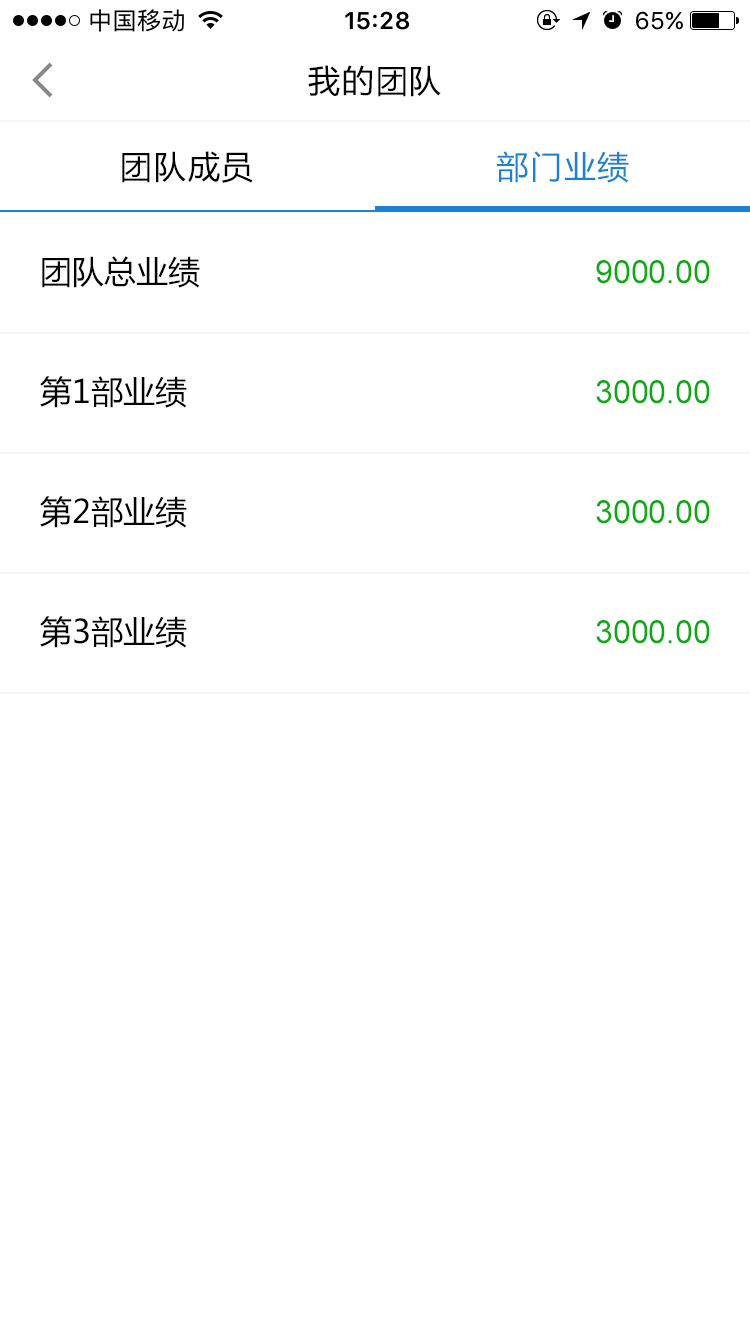
<style>
.page{position:relative;width:750px;height:1334px;background:#ffffff}
.page>*{position:absolute;margin:0}
.t1{font:32px "MicrosoftYaHei";letter-spacing:0.05em;color:#000000}
.t2{font:32px "MicrosoftYaHei";letter-spacing:0.05em;color:#1b82d2}
.t3{font:32px "MicrosoftYaHei";color:#000000}
.t4{font:32px "ArialMT";color:#0da914}
</style>
<div class="page">
<p class="t1" style="left:308px;top:65px;width:133px;height:32px">我的团队</p>
<p class="t1" style="left:122px;top:151px;width:131px;height:32px">团队成员</p>
<p class="t2" style="left:496px;top:151px;width:133px;height:32px">部门业绩</p>
<p class="t3" style="left:42px;top:256px;width:158px;height:32px">团队总业绩</p>
<p class="t4" style="left:596px;top:260px;width:114px;height:24px">9000.00</p>
<p class="t3" style="left:40px;top:376px;width:147px;height:32px">第1部业绩</p>
<p class="t4" style="left:596px;top:380px;width:114px;height:24px">3000.00</p>
<p class="t3" style="left:40px;top:496px;width:147px;height:32px">第2部业绩</p>
<p class="t4" style="left:596px;top:500px;width:114px;height:24px">3000.00</p>
<p class="t3" style="left:40px;top:616px;width:147px;height:32px">第3部业绩</p>
<p class="t4" style="left:596px;top:620px;width:114px;height:24px">3000.00</p>
</div>
